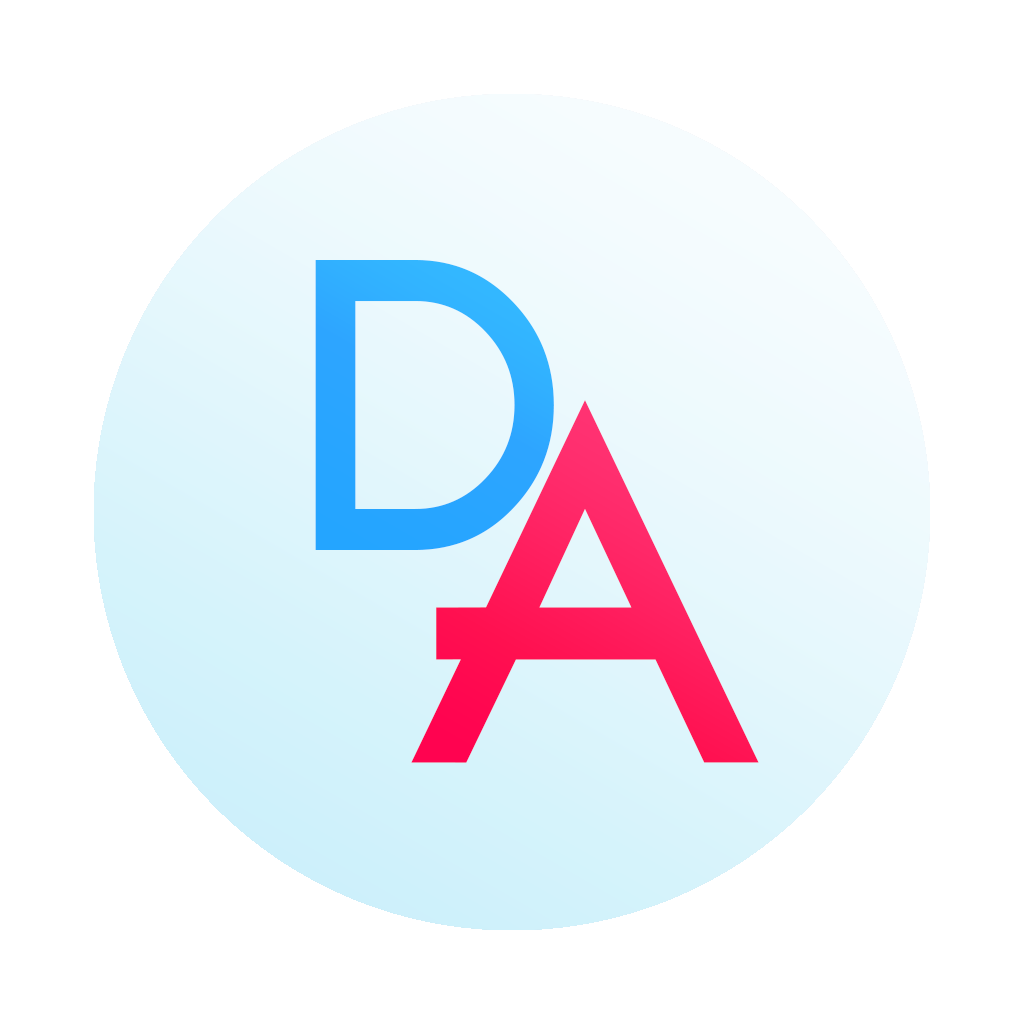
<style>
.page{position:relative;width:1024px;height:1024px;background:#ffffff}
.page>*{position:absolute;margin:0}
.t1{font:400px "BroadbandICGRegular";color:#2da5ff}
.t2{font:500px "BroadbandICGRegular";color:#ff1a5a}
</style>
<div class="page">
<p class="t1" style="left:315px;top:260px;width:239px;height:290px">D</p>
<p class="t2" style="left:411px;top:400px;width:348px;height:363px">A</p>
</div>
